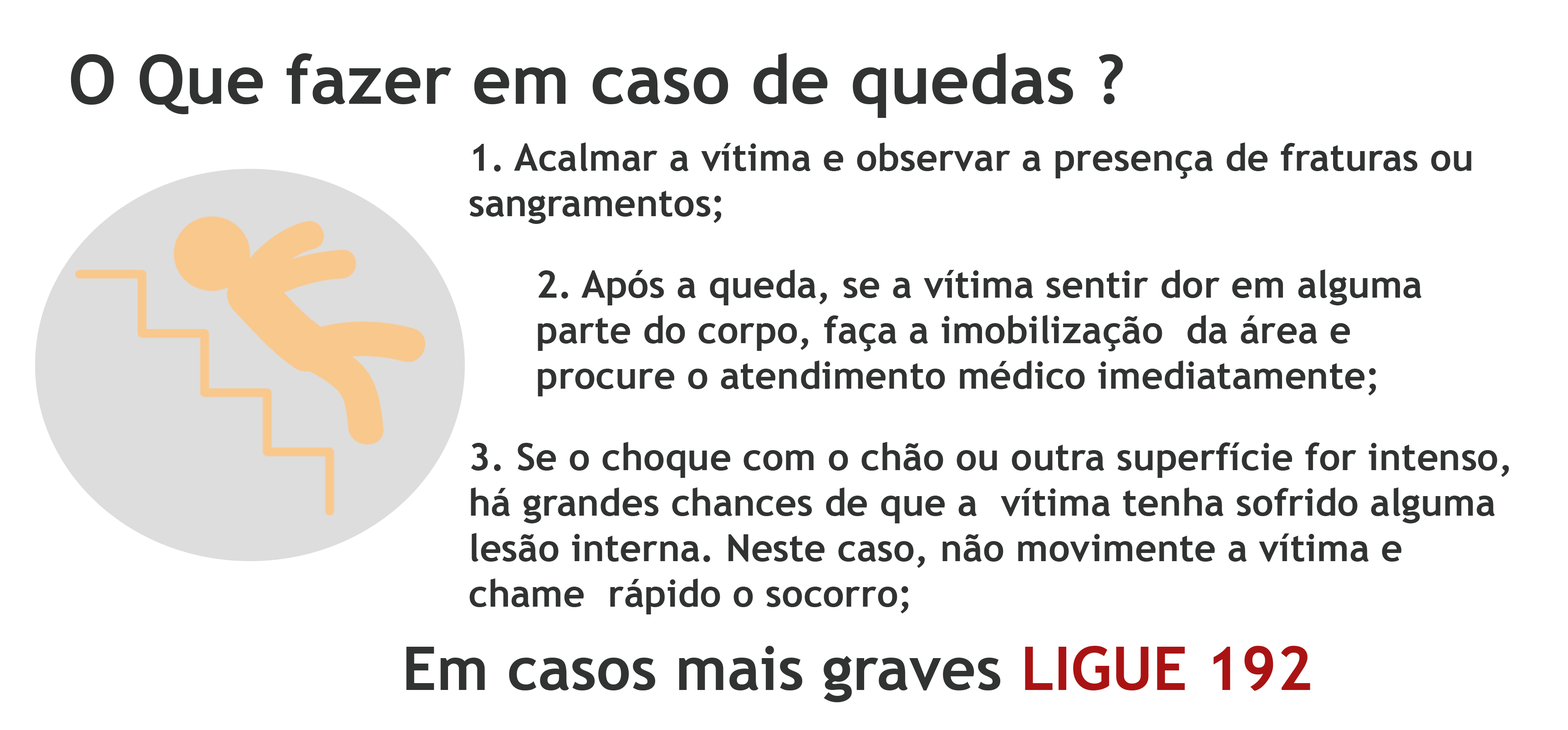
<style>
.page{position:relative;width:1568px;height:730px;background:#ffffff}
.page>*{position:absolute;margin:0}
.t1{font:68.3px "TrebuchetMS-Bold";color:#313232}
.t2{font:37.9px "TrebuchetMS-Bold";color:#313232}
.t3{font:60.7px "TrebuchetMS-Bold";color:#313232}
.t4{font:60.7px "TrebuchetMS-Bold";color:#aa1313}
</style>
<div class="page">
<p class="t1" style="left:71px;top:53px;width:1052px;height:65px">O Que fazer em caso de quedas ?</p>
<p class="t2" style="left:469px;top:143px;width:1002px;height:81px">1. Acalmar a vítima e observar a presença de fraturas ou <br>sangramentos;</p>
<p class="t2" style="left:538px;top:270px;width:884px;height:127px">2. Após a queda, se a vítima sentir dor em alguma <br>parte do corpo, faça a imobilização  da área e <br>procure o atendimento médico imediatamente;</p>
<p class="t2" style="left:469px;top:442px;width:1040px;height:173px">3. Se o choque com o chão ou outra superfície for intenso, <br>há grandes chances de que a  vítima tenha sofrido alguma <br>lesão interna. Neste caso, não movimente a vítima e <br>chame  rápido o socorro;</p>
<p class="t3" style="left:406px;top:646px;width:904px;height:57px">Em casos mais graves<span class="t4"> LIGUE 192</span></p>
</div>
